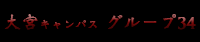
<style>
.page{position:relative;width:200px;height:42px;background:#000000}
.page>*{position:absolute;margin:0}
.t1{font:18px "WeibeiTC-Bold"}
.t2{font:12px "WeibeiTC-Bold"}
</style>
<div class="page">
<p class="t1" style="left:4px;top:14px;width:192px;height:16px">大宮<span class="t2">キャンパス </span>グループ34</p>
</div>
